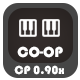
<style>
.page{position:relative;width:80px;height:80px;background:#464646}
.page>*{position:absolute;margin:0}
.t1{font:15px "Bauhaus93";color:#ffffff}
.t2{font:12px "Bauhaus93";color:#ffffff}
</style>
<div class="page">
<p class="t1" style="left:17px;top:46px;width:46px;height:12px">CO-OP</p>
<p class="t2" style="left:14px;top:65px;width:50px;height:10px">CP 0.90x</p>
</div>
